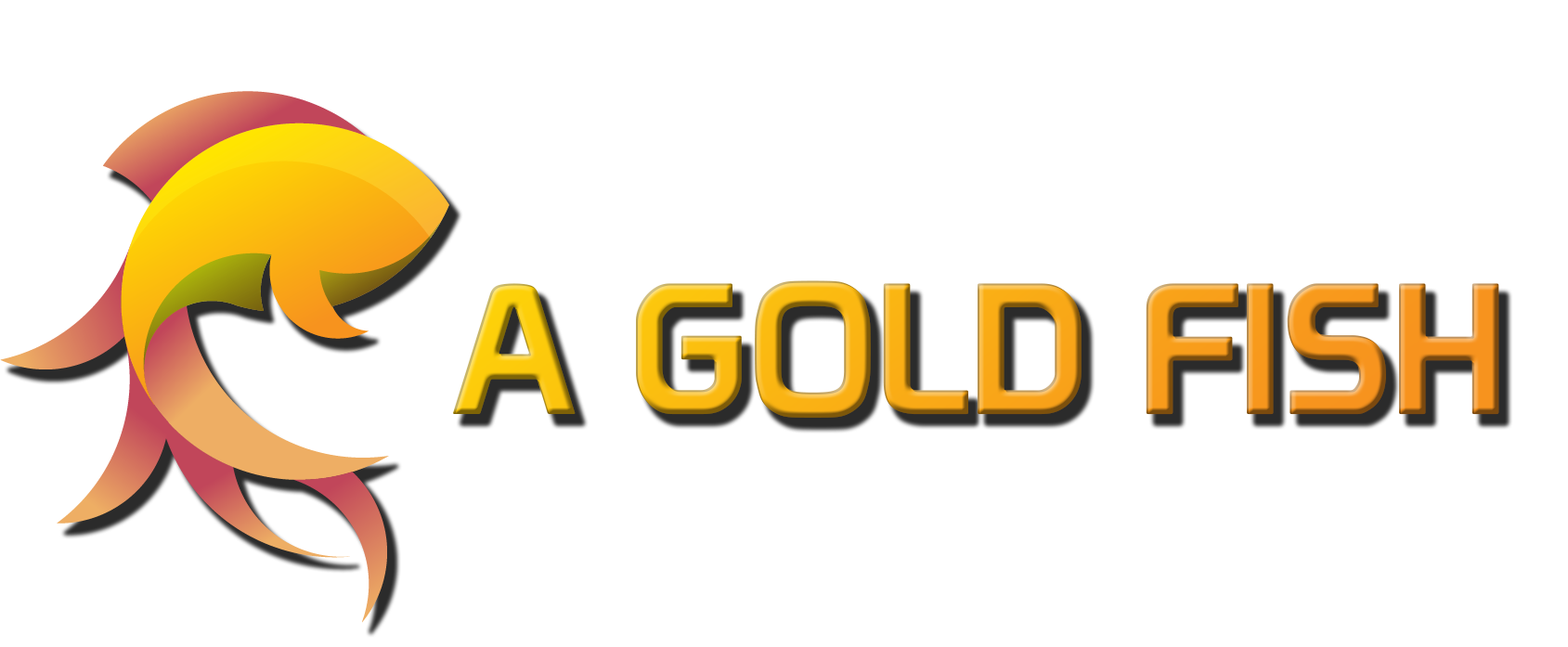
<style>
.page{position:relative;width:1568px;height:647px;background:#ffffff}
.page>*{position:absolute;margin:0}
.t1{font:181.8px "Prototype"}
</style>
<div class="page">
<p class="t1" style="left:453px;top:280px;width:1046px;height:138px">A GOLD FISH</p>
</div>
